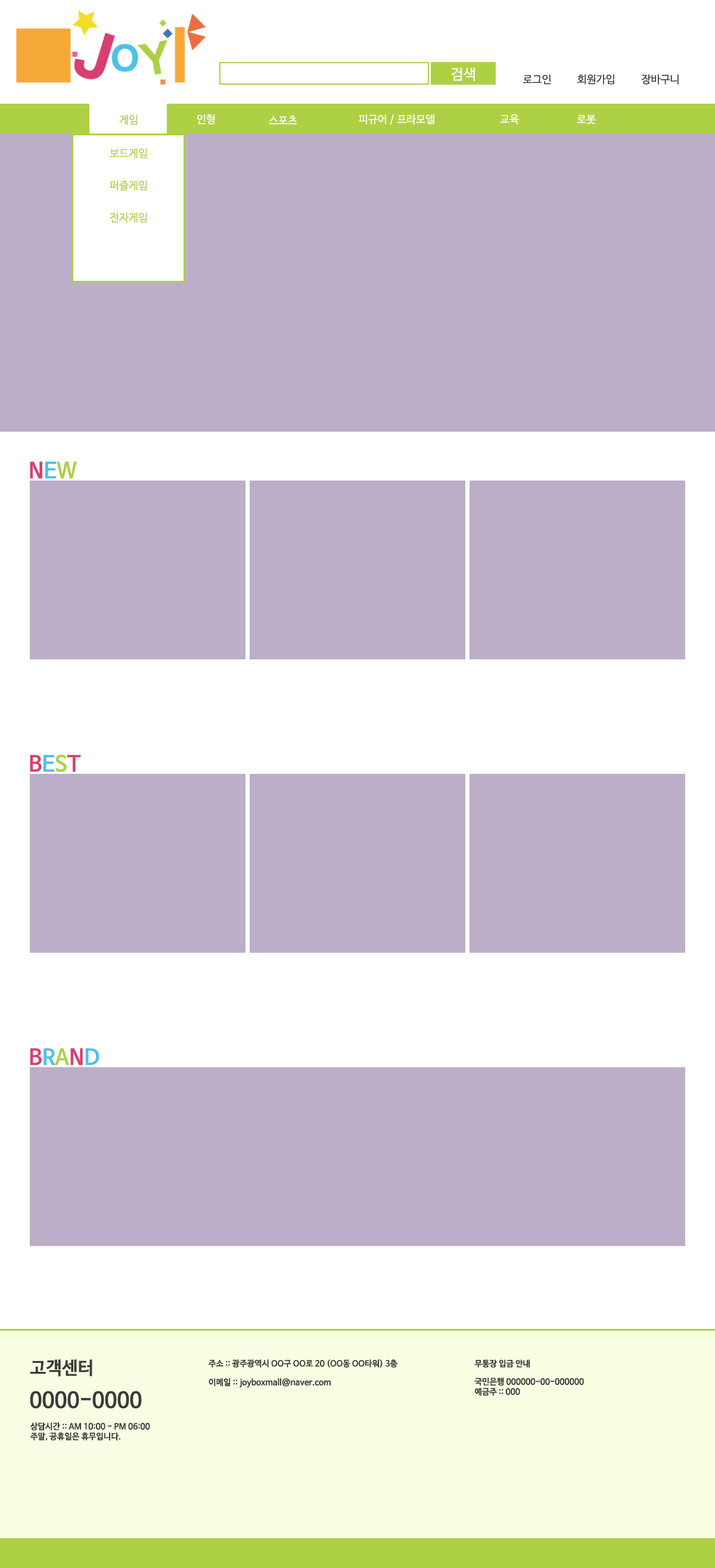
<style>
.page{position:relative;width:715px;height:1568px;background:#bcaec8}
.page>*{position:absolute;margin:0}
.t1{font:14.3px "NanumBarunGothic";color:#ffffff}
.t2{font:10.7px "NanumBarunGothic";color:#3a3a3a}
.t3{font:10.7px "NanumBarunGothic";color:#ffffff}
.t4{font:10.7px "NanumBarunGothic";color:#aed044}
.t5{font:21.5px "NanumBarunGothicBold";color:#d93e70}
.t6{font:21.5px "NanumBarunGothicBold";color:#4ec0e7}
.t7{font:21.5px "NanumBarunGothicBold";color:#aed044}
.t8{font:17.9px "NanumBarunGothicBold";color:#3a3a3a}
.t9{font:8.3px "NanumBarunGothicBold";color:#3a3a3a}
.t10{font:21.5px "NanumBarunGothicBold";color:#3a3a3a}
</style>
<div class="page">
<p class="t1" style="left:451px;top:67px;width:24px;height:14px">검색</p>
<p class="t2" style="left:523px;top:74px;width:28px;height:11px">로그인</p>
<p class="t2" style="left:578px;top:74px;width:37px;height:11px">회원가입</p>
<p class="t2" style="left:642px;top:74px;width:37px;height:11px">장바구니</p>
<p class="t3" style="left:197px;top:114px;width:18px;height:11px">인형</p>
<p class="t3" style="left:359px;top:114px;width:76px;height:11px">피규어 / 프라모델</p>
<p class="t3" style="left:500px;top:114px;width:19px;height:11px">교육</p>
<p class="t4" style="left:119px;top:114px;width:19px;height:11px">게임</p>
<p class="t3" style="left:269px;top:116px;width:29px;height:9px">스포츠</p>
<p class="t3" style="left:577px;top:114px;width:19px;height:11px">로봇</p>
<p class="t4" style="left:110px;top:148px;width:37px;height:11px">보드게임</p>
<p class="t4" style="left:110px;top:180px;width:37px;height:11px">퍼즐게임</p>
<p class="t4" style="left:110px;top:212px;width:37px;height:11px">전자게임</p>
<p class="t5" style="left:30px;top:461px;width:47px;height:18px">N<span class="t6">E</span><span class="t7">W</span></p>
<p class="t5" style="left:30px;top:755px;width:51px;height:17px">B<span class="t6">E</span><span class="t7">S</span>T</p>
<p class="t5" style="left:30px;top:1048px;width:70px;height:17px">B<span class="t6">R</span><span class="t7">A</span>N<span class="t6">D</span></p>
<p class="t8" style="left:30px;top:1359px;width:62px;height:18px">고객센터</p>
<p class="t9" style="left:209px;top:1359px;width:189px;height:9px">주소 :: 광주광역시 OO구 OO로 20 (OO동 OO타워) 3층</p>
<p class="t9" style="left:475px;top:1359px;width:55px;height:9px">무통장 입금 안내</p>
<p class="t9" style="left:209px;top:1378px;width:122px;height:10px">이메일 :: joyboxmall@naver.com</p>
<p class="t9" style="left:475px;top:1377px;width:109px;height:19px">국민은행 000000-00-000000<br>예금주 :: 000</p>
<p class="t10" style="left:30px;top:1391px;width:112px;height:18px">0000-0000</p>
<p class="t9" style="left:30px;top:1422px;width:120px;height:19px">상담시간 :: AM 10:00 - PM 06:00<br>주말, 공휴일은 휴무입니다.</p>
</div>
